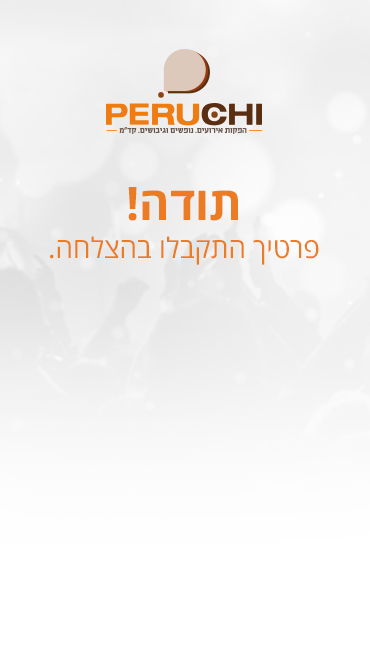
<style>
.page{position:relative;width:370px;height:645px}
.page>*{position:absolute;margin:0}
.t1{font:28.3px/38px "OpenSansHebrew-Regular";color:#ec7c23}
.t2{font:46.2px/38px "OpenSansHebrew-Bold";color:#ec7c23}
</style>
<div class="page">
<p class="t1" style="left:50px;top:187px;width:269px;height:78px;text-align:center"><span class="t2">תודה!<br></span>פרטיך התקבלו בהצלחה.</p>
</div>
